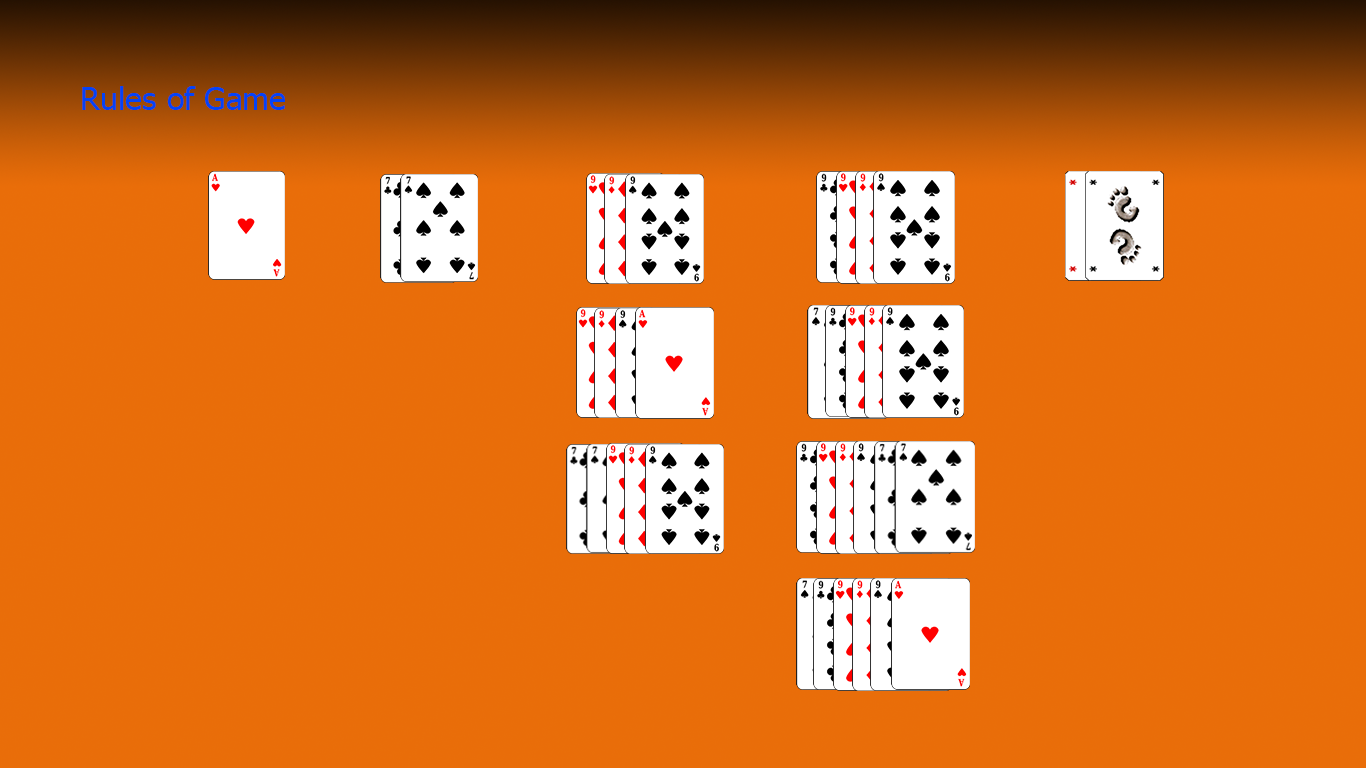
<style>
.page{position:relative;width:1366px;height:768px;background:#e96d09}
.page>*{position:absolute;margin:0}
.t1{font:32px "Tahoma";color:#0443f7}
</style>
<div class="page">
<p class="t1" style="left:82px;top:86px;width:203px;height:24px">Rules of Game</p>
</div>
